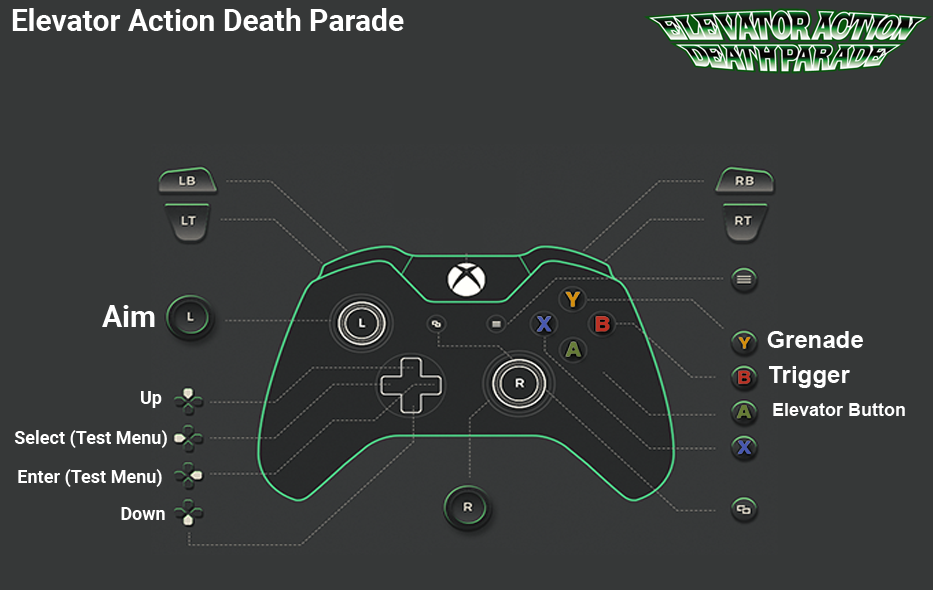
<style>
.page{position:relative;width:933px;height:590px;background:#363838}
.page>*{position:absolute;margin:0}
.t1{font:30px "Roboto-Bold";color:#ffffff}
.t2{font:30px "Roboto-Bold";color:#fefefe}
.t3{font:24px "Arial-BoldMT";color:#fefefe}
.t4{font:18px "Roboto-Bold";color:#ffffff}
.t5{font:18px "Arial-BoldMT";color:#fefefe}
</style>
<div class="page">
<p class="t1" style="left:12px;top:8px;width:392px;height:23px">Elevator Action Death Parade</p>
<p class="t2" style="left:102px;top:305px;width:53px;height:22px">Aim</p>
<p class="t3" style="left:767px;top:331px;width:96px;height:17px">Grenade</p>
<p class="t3" style="left:769px;top:366px;width:81px;height:22px">Trigger</p>
<p class="t4" style="left:141px;top:391px;width:21px;height:17px">Up</p>
<p class="t5" style="left:773px;top:403px;width:132px;height:13px">Elevator Button</p>
<p class="t4" style="left:14px;top:430px;width:153px;height:18px">Select (Test Menu)</p>
<p class="t4" style="left:18px;top:469px;width:144px;height:18px">Enter (Test Menu)</p>
<p class="t4" style="left:121px;top:507px;width:44px;height:13px">Down</p>
</div>
